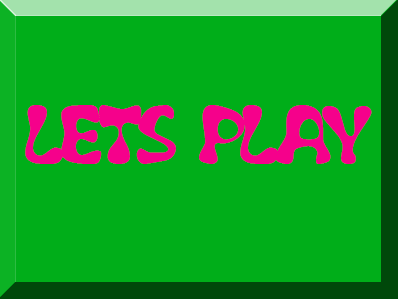
<style>
.page{position:relative;width:400px;height:300px;background:#00ae19}
.page>*{position:absolute;margin:0}
.t1{font:72px "Flubber";color:#f5018b}
</style>
<div class="page">
<p class="t1" style="left:25px;top:105px;width:347px;height:59px">LETS PLAY</p>
</div>
